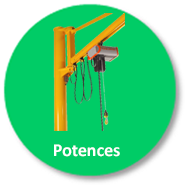
<style>
.page{position:relative;width:185px;height:185px;background:#00cc66}
.page>*{position:absolute;margin:0}
.t1{font:18px "Calibri-Bold";color:#ffffff}
</style>
<div class="page">
<p class="t1" style="left:54px;top:144px;width:66px;height:13px">Potences</p>
</div>
